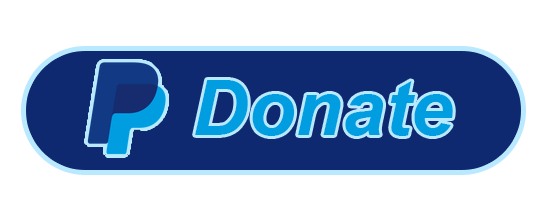
<style>
.page{position:relative;width:542px;height:221px;background:#ffffff}
.page>*{position:absolute;margin:0}
.t1{font:77.1px "Arial-BoldItalicMT";color:#009de1}
</style>
<div class="page">
<p class="t1" style="left:195px;top:80px;width:258px;height:56px">Donate</p>
</div>
